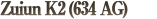
<style>
.page{position:relative;width:157px;height:19px;background:#ffffff}
.page>*{position:absolute;margin:0}
.t1{font:18px "RyuminPro-ExBold";letter-spacing:-0.08em;color:#4a3f32;font-weight:bold;scale:0.9 1}
</style>
<div class="page">
<p class="t1" style="left:0px;top:0px;width:128px;height:19px">Zuiun K2 (634 AG)</p>
</div>
